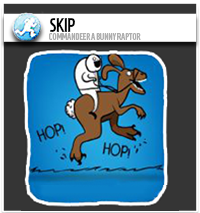
<style>
.page{position:relative;width:200px;height:213px;background:#353535}
.page>*{position:absolute;margin:0}
.t1{font:19px "HomenajeMod-Bold";color:#000101;scale:0.87 1}
.t2{font:9.5px "HomenajeMod-Bold";color:#afafaf;scale:0.87 1}
</style>
<div class="page">
<p class="t1" style="left:50px;top:18px;width:25px;height:14px">SKIP</p>
<p class="t2" style="left:49px;top:33px;width:92px;height:7px">COMMANDEER A BUNNY RAPTOR</p>
</div>
